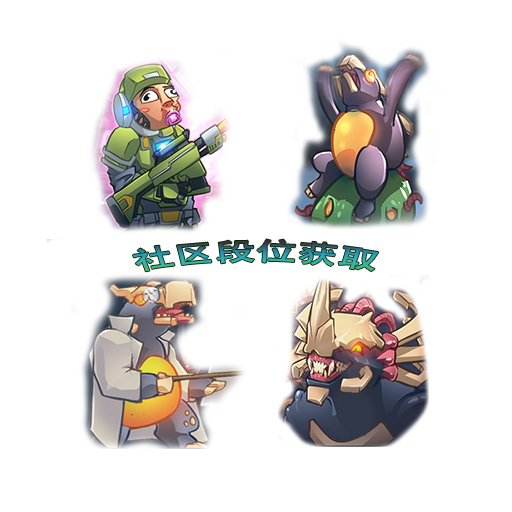
<style>
.page{position:relative;width:512px;height:512px;background:#ffffff}
.page>*{position:absolute;margin:0}
.t1{font:25.1px "AdobeHeitiStd-Regular";scale:1.55 1}
</style>
<div class="page">
<p class="t1" style="left:133px;top:239px;width:246px;height:33px">社区段位获取</p>
</div>
